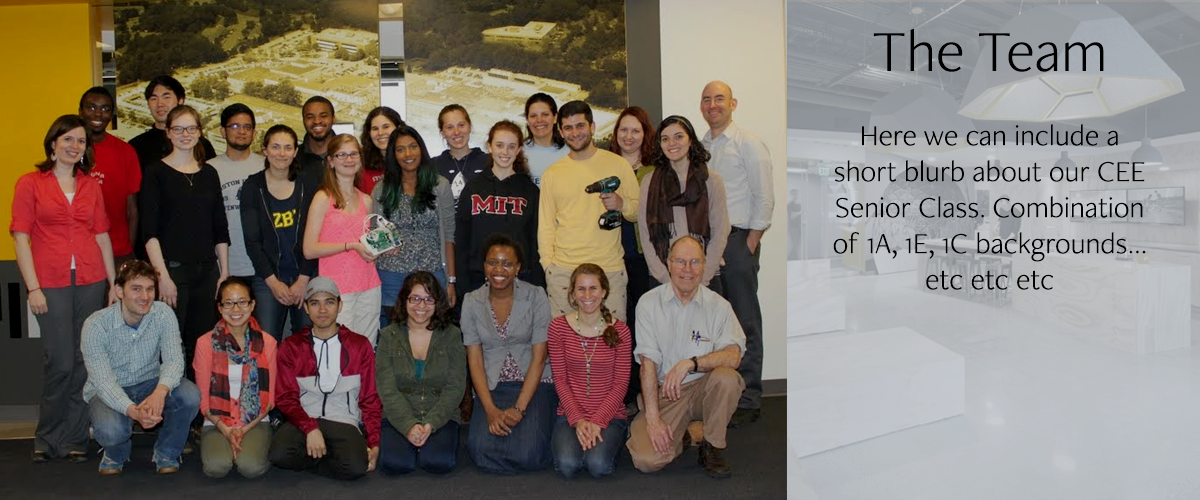
<style>
.page{position:relative;width:1200px;height:500px}
.page>*{position:absolute;margin:0}
.t1{font:60px "FreightNeoProLight-Regular";color:#000000}
.t2{font:30px "FreightNeoProLight-Regular";color:#000000}
</style>
<div class="page">
<p class="t1" style="left:873px;top:28px;width:231px;height:44px">The Team</p>
<p class="t2" style="left:833px;top:124px;width:313px;height:166px;text-align:center">Here we can include a short blurb about our CEE Senior Class. Combination of 1A, 1E, 1C backgrounds... etc etc etc</p>
</div>
